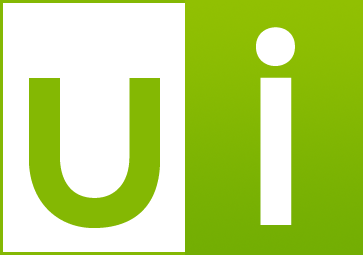
<style>
.page{position:relative;width:363px;height:255px;background:#ffffff}
.page>*{position:absolute;margin:0}
.t1{font:300px "Ronda-Medium";color:#ffffff}
.t2{font:300px "Ronda-Medium";color:#84b803}
</style>
<div class="page">
<p class="t1" style="left:256px;top:27px;width:39px;height:198px">i</p>
<p class="t2" style="left:29px;top:78px;width:131px;height:150px">u</p>
</div>
